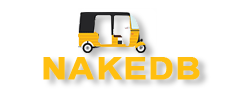
<style>
.page{position:relative;width:234px;height:91px;background:#ffffff}
.page>*{position:absolute;margin:0}
.t1{font:30px "Arial-BoldMT";letter-spacing:0.04em;color:#ffbf10;font-weight:bold;scale:1.15 1}
</style>
<div class="page">
<p class="t1" style="left:43px;top:57px;width:157px;height:23px">NAKEDB</p>
</div>
